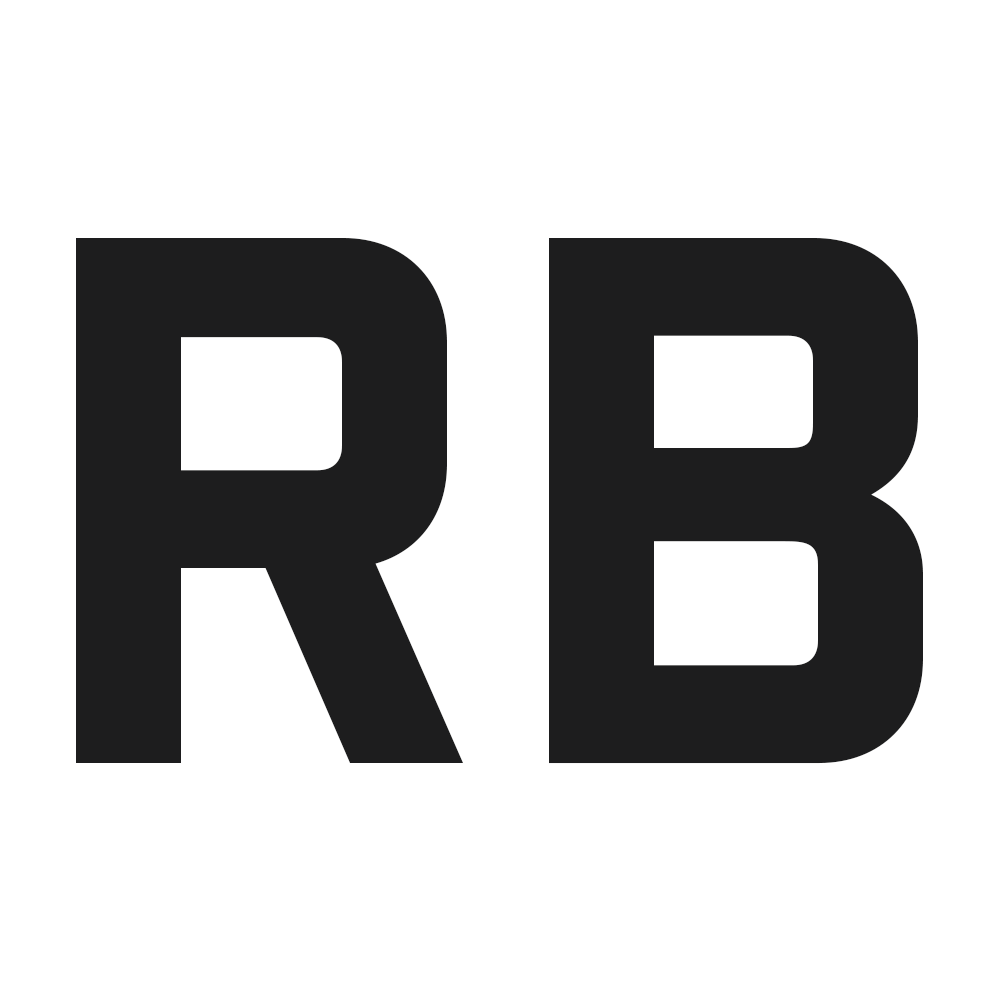
<style>
.page{position:relative;width:1000px;height:1000px;background:#ffffff}
.page>*{position:absolute;margin:0}
.t1{font:729.2px "IndustryInc-Base";color:#1d1d1e}
</style>
<div class="page">
<p class="t1" style="left:76px;top:238px;width:847px;height:526px">RB</p>
</div>
